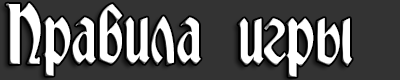
<style>
.page{position:relative;width:400px;height:80px;background:#333333}
.page>*{position:absolute;margin:0}
.t1{font:75px "RomvelCyr";color:#ffffff;scale:0.95 1}
</style>
<div class="page">
<p class="t1" style="left:6px;top:3px;width:346px;height:74px">Правила игры</p>
</div>
